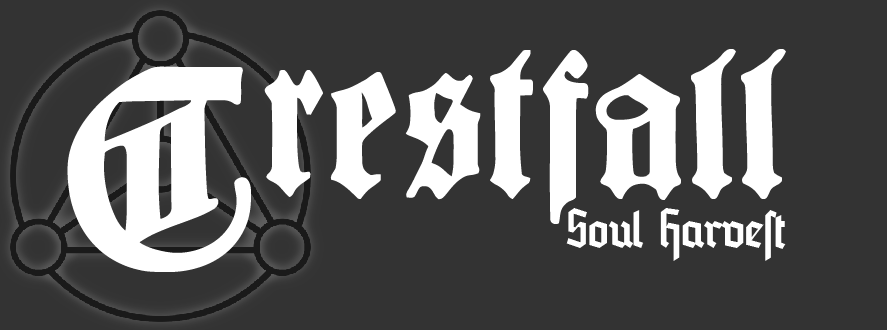
<style>
.page{position:relative;width:887px;height:330px;background:#333333}
.page>*{position:absolute;margin:0}
.t1{font:200px "BarloesiusSchrift";color:#ffffff}
.t2{font:266.6px "BarloesiusSchrift";color:#ffffff}
.t3{font:57.3px "Blankenburg-Regular";color:#ffffff}
</style>
<div class="page">
<p class="t1" style="left:264px;top:49px;width:522px;height:175px">restfall</p>
<p class="t2" style="left:67px;top:66px;width:184px;height:206px">C</p>
<p class="t3" style="left:566px;top:208px;width:220px;height:53px">Soul Harvest</p>
</div>
